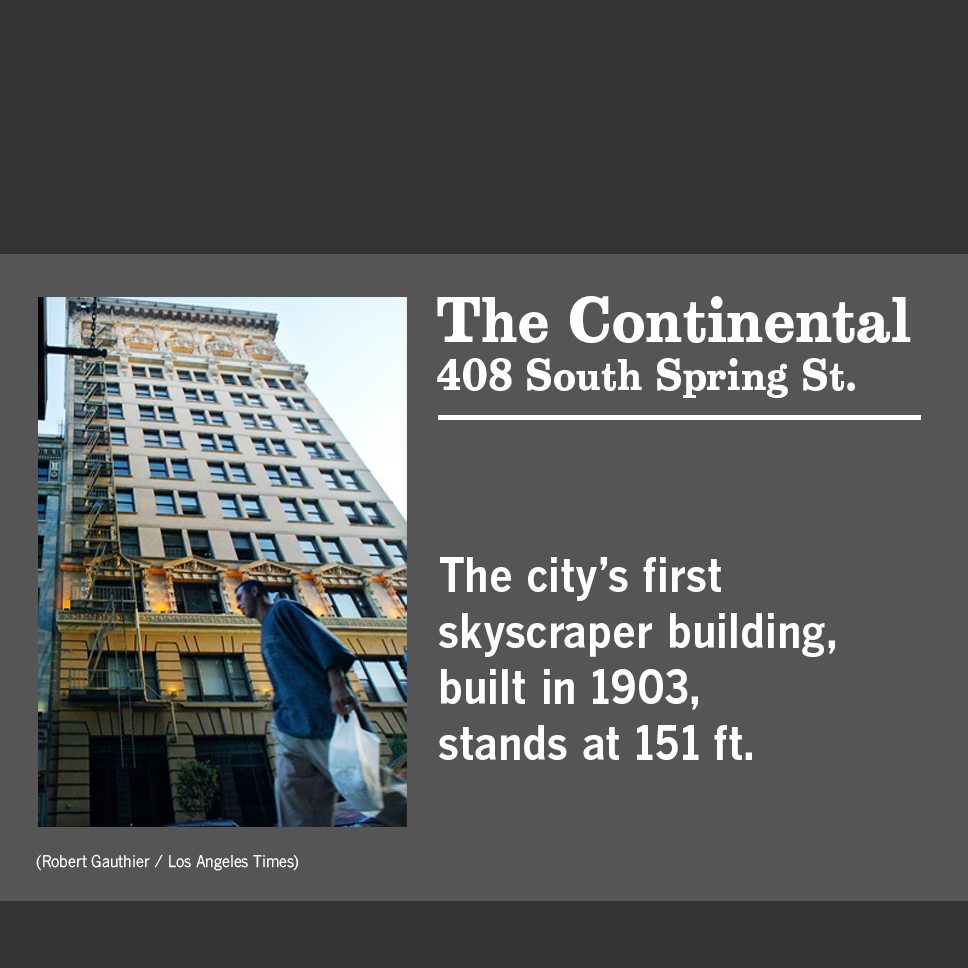
<style>
.page{position:relative;width:968px;height:968px;background:#555555}
.page>*{position:absolute;margin:0}
.t1{font:40.1px "Belizio-Bold";color:#ffffff;scale:0.91 1}
.t2{font:58.8px "Belizio-Bold";color:#ffffff;scale:0.91 1}
.t3{font:46.8px "BentonGothic-Bold";color:#ffffff;scale:0.91 1}
.t4{font:16px "BentonGothicTab-Regular";color:#ffffff;scale:0.91 1}
</style>
<div class="page">
<p class="t1" style="left:437px;top:296px;width:474px;height:102px"><span class="t2">The Continental<br></span>408 South Spring St.</p>
<p class="t3" style="left:438px;top:557px;width:397px;height:203px"><span class="t1"><br></span>The city’s first<br>skyscraper building,<br>built in 1903,<br>stands at 151 ft.</p>
<p class="t4" style="left:36px;top:854px;width:262px;height:17px">(Robert Gauthier / Los Angeles Times)</p>
</div>
